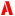
<style>
.page{position:relative;width:15px;height:16px;background:#ffffff}
.page>*{position:absolute;margin:0}
.t1{font:22px "MajorSnafu";color:#ff0000}
</style>
<div class="page">
<p class="t1" style="left:1px;top:1px;width:13px;height:15px">A</p>
</div>
